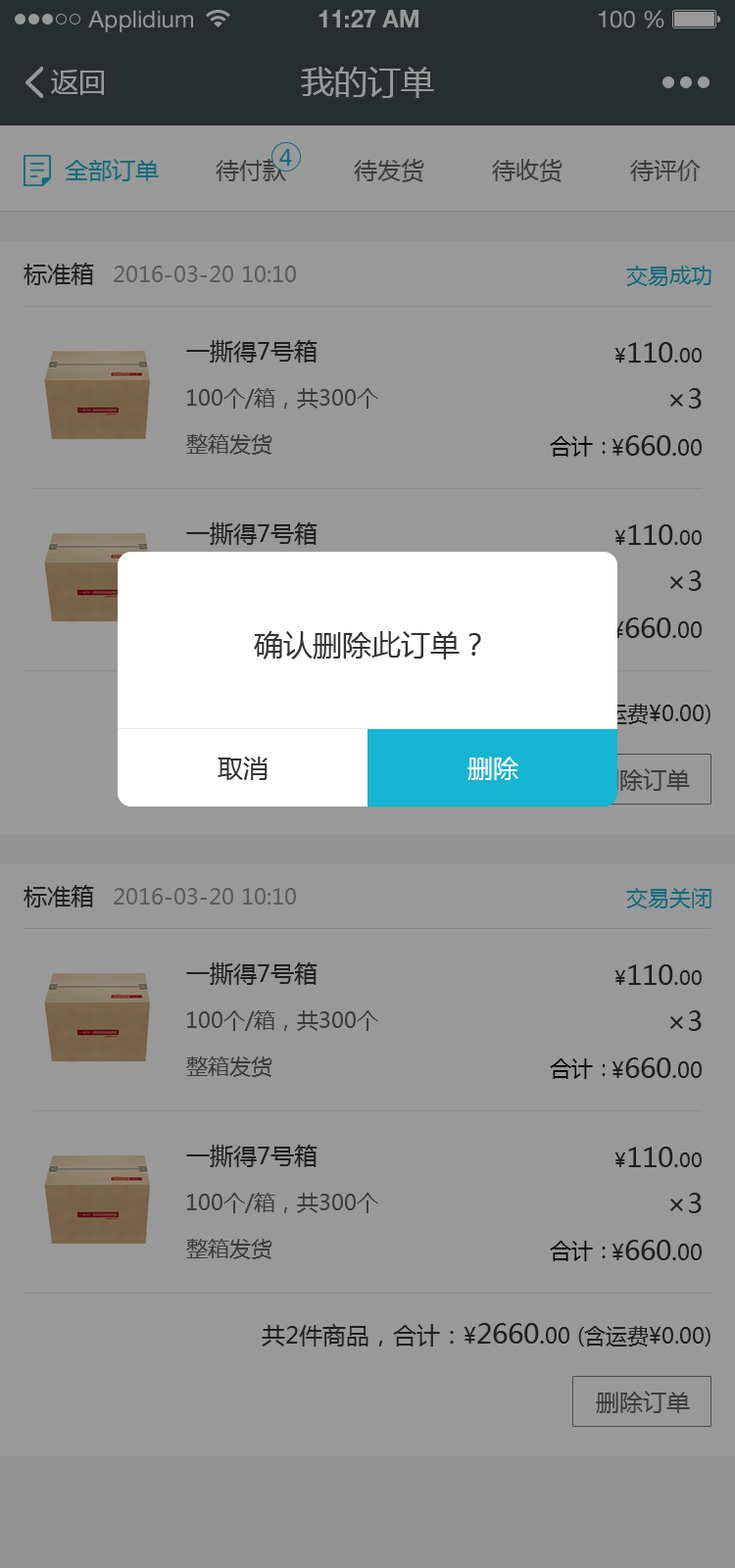
<style>
.page{position:relative;width:735px;height:1568px;background:#999999}
.page>*{position:absolute;margin:0}
.t1{font:23.5px "HelveticaNeueLTStd-Roman";color:#999999}
.t2{font:23.5px "HelveticaNeueLTStd-Bd";color:#999999}
.t3{font:27.4px "MicrosoftYaHei";color:#999999}
.t4{font:33.3px "MicrosoftYaHei";color:#999999}
.t5{font:21.6px "MicrosoftYaHei";color:#0d6c7d}
.t6{font:23.5px "MicrosoftYaHei";color:#0d6c7d}
.t7{font:23.5px "MicrosoftYaHei";color:#3d3d3d}
.t8{font:23.5px "MicrosoftYaHei";color:#333333}
.t9{font:21.6px "MicrosoftYaHei";color:#5c5c5c}
.t10{font:27.4px "MicrosoftYaHei";color:#333333}
.t11{font:19.6px "MicrosoftYaHei";color:#333333}
.t12{font:21.6px "MicrosoftYaHei";color:#3d3d3d}
.t13{font:21.6px "MicrosoftYaHei";color:#000000}
.t14{font:21.6px "MicrosoftYaHei";color:#333333}
.t15{font:25.5px "MicrosoftYaHei";color:#333333}
.t16{font:29.4px "MicrosoftYaHei";color:#333333}
.t17{font:25.5px "MicrosoftYaHei";color:#ffffff}
</style>
<div class="page">
<p class="t1" style="left:88px;top:10px;width:105px;height:22px">Applidium</p>
<p class="t2" style="left:318px;top:10px;width:100px;height:17px">11:27 AM</p>
<p class="t1" style="left:599px;top:10px;width:65px;height:18px">100 %</p>
<p class="t3" style="left:51px;top:70px;width:53px;height:25px">返回</p>
<p class="t4" style="left:301px;top:67px;width:133px;height:31px">我的订单</p>
<p class="t5" style="left:279px;top:149px;width:13px;height:17px">4</p>
<p class="t6" style="left:65px;top:159px;width:94px;height:22px">全部订单</p>
<p class="t7" style="left:216px;top:159px;width:70px;height:22px">待付款</p>
<p class="t7" style="left:354px;top:159px;width:70px;height:23px">待发货</p>
<p class="t7" style="left:492px;top:159px;width:71px;height:23px">待收货</p>
<p class="t7" style="left:630px;top:160px;width:71px;height:21px">待评价</p>
<p class="t8" style="left:24px;top:263px;width:70px;height:22px">标准箱</p>
<p class="t9" style="left:114px;top:266px;width:182px;height:16px">2016-03-20 10:10</p>
<p class="t5" style="left:626px;top:266px;width:85px;height:20px">交易成功</p>
<p class="t8" style="left:186px;top:340px;width:132px;height:23px">一撕得7号箱</p>
<p class="t10" style="left:614px;top:342px;width:88px;height:21px"><span class="t11">¥</span>110<span class="t8">.</span><span class="t11">00</span></p>
<p class="t12" style="left:187px;top:388px;width:191px;height:21px">100个/箱，共300个</p>
<p class="t10" style="left:670px;top:388px;width:32px;height:21px">×3</p>
<p class="t12" style="left:186px;top:434px;width:86px;height:21px">整箱发货</p>
<p class="t13" style="left:550px;top:436px;width:56px;height:21px">合计：</p>
<p class="t10" style="left:612px;top:435px;width:90px;height:21px"><span class="t14">¥</span>660<span class="t15">.</span><span class="t14">00</span></p>
<p class="t8" style="left:186px;top:522px;width:132px;height:23px">一撕得7号箱</p>
<p class="t10" style="left:614px;top:524px;width:88px;height:21px"><span class="t11">¥</span>110<span class="t8">.</span><span class="t11">00</span></p>
<p class="t10" style="left:670px;top:570px;width:32px;height:21px">×3</p>
<p class="t10" style="left:612px;top:617px;width:90px;height:21px"><span class="t14">¥</span>660<span class="t15">.</span><span class="t14">00</span></p>
<p class="t16" style="left:254px;top:631px;width:227px;height:29px">确认删除此订单？</p>
<p class="t15" style="left:218px;top:757px;width:50px;height:23px">取消</p>
<p class="t17" style="left:467px;top:757px;width:51px;height:23px">删除</p>
<p class="t7" style="left:596px;top:768px;width:94px;height:23px">删除订单</p>
<p class="t8" style="left:24px;top:885px;width:70px;height:22px">标准箱</p>
<p class="t9" style="left:114px;top:888px;width:182px;height:17px">2016-03-20 10:10</p>
<p class="t5" style="left:626px;top:888px;width:85px;height:20px">交易关闭</p>
<p class="t8" style="left:186px;top:962px;width:132px;height:23px">一撕得7号箱</p>
<p class="t10" style="left:614px;top:964px;width:88px;height:21px"><span class="t11">¥</span>110<span class="t8">.</span><span class="t11">00</span></p>
<p class="t12" style="left:187px;top:1010px;width:191px;height:21px">100个/箱，共300个</p>
<p class="t10" style="left:670px;top:1010px;width:32px;height:21px">×3</p>
<p class="t12" style="left:186px;top:1056px;width:86px;height:21px">整箱发货</p>
<p class="t13" style="left:550px;top:1058px;width:56px;height:21px">合计：</p>
<p class="t10" style="left:612px;top:1057px;width:90px;height:21px"><span class="t14">¥</span>660<span class="t15">.</span><span class="t14">00</span></p>
<p class="t8" style="left:186px;top:1145px;width:132px;height:22px">一撕得7号箱</p>
<p class="t10" style="left:614px;top:1147px;width:88px;height:20px"><span class="t11">¥</span>110<span class="t8">.</span><span class="t11">00</span></p>
<p class="t12" style="left:187px;top:1193px;width:191px;height:20px">100个/箱，共300个</p>
<p class="t10" style="left:670px;top:1193px;width:32px;height:20px">×3</p>
<p class="t12" style="left:186px;top:1239px;width:86px;height:20px">整箱发货</p>
<p class="t13" style="left:550px;top:1241px;width:56px;height:20px">合计：</p>
<p class="t10" style="left:612px;top:1240px;width:90px;height:20px"><span class="t14">¥</span>660<span class="t15">.</span><span class="t14">00</span></p>
<p class="t14" style="left:262px;top:1323px;width:448px;height:24px"><span class="t8">共2件商品，合计：</span>¥<span class="t10">2660</span><span class="t15">.</span>00 (含运费¥0.00)</p>
<p class="t7" style="left:596px;top:1391px;width:94px;height:22px">删除订单</p>
</div>
